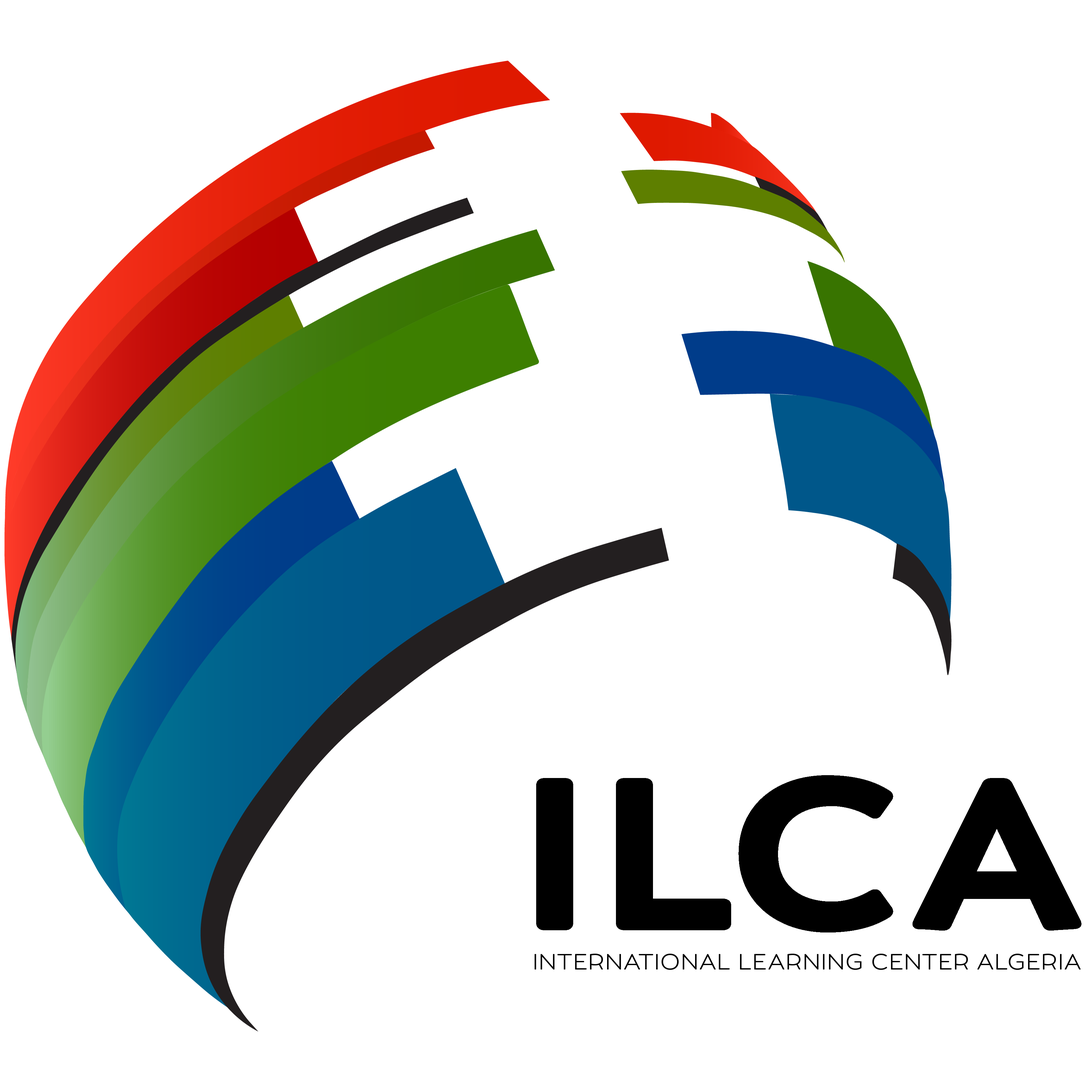
<style>
.page{position:relative;width:1092px;height:1092px;background:#ffffff}
.page>*{position:absolute;margin:0}
.t1{font:21.3px "UmbaSoft-SCLightDemo";letter-spacing:0.034em;color:#000000;scale:1.09 1}
</style>
<div class="page">
<p class="t1" style="left:535px;top:954px;width:546px;height:16px">INTERNATIONAL LEARNING CENTER ALGERIA</p>
</div>
